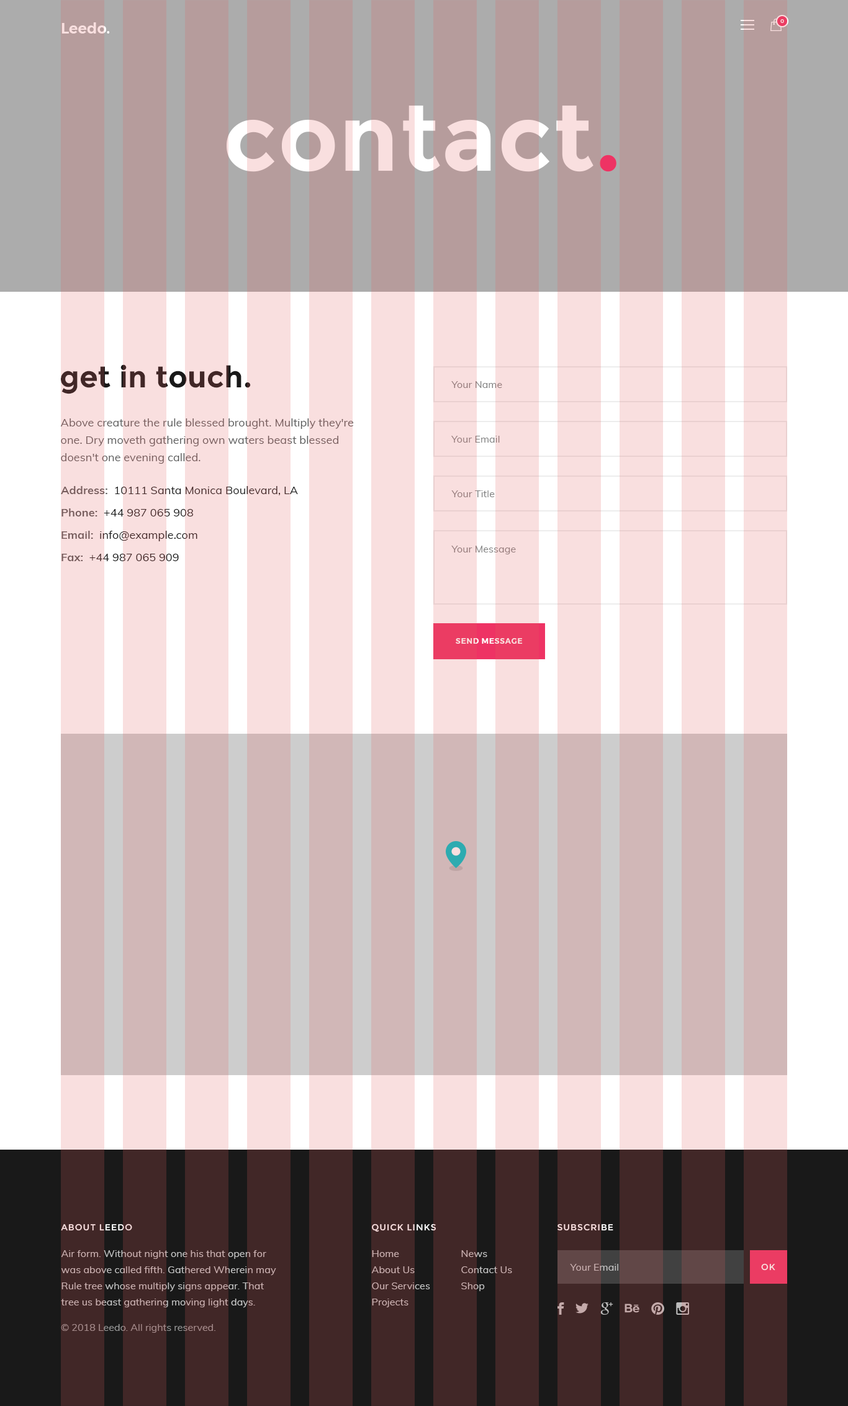
<style>
.page{position:relative;width:848px;height:1406px}
.page>*{position:absolute;margin:0}
.t1{font:14.9px "Montserrat-SemiBold";color:#f9dfdf}
.t2{font:5px "Montserrat-Medium";letter-spacing:0.05em;color:#f9dfdf;text-transform:uppercase}
.t3{font:93.1px "Montserrat-Bold";letter-spacing:0.01em}
.t4{font:29.8px "Montserrat-Bold";letter-spacing:0.005em;color:#412727}
.t5{font:9.9px "Muli-Regular";letter-spacing:0.005em;color:#818181}
.t6{font:11.2px/17.4px "Muli-Regular";letter-spacing:0.005em}
.t7{font:11.2px/22.3px "Muli-Regular";letter-spacing:0.005em}
.t8{font:11.2px/22.3px "Muli-Bold";letter-spacing:0.005em}
.t9{font:7.4px "Montserrat-SemiBold";letter-spacing:0.075em;color:#f9dfdf;text-transform:uppercase}
.t10{font:8.7px "Montserrat-Regular";letter-spacing:0.075em;color:#f9dfdf;text-transform:uppercase}
.t11{font:9.9px/16.1px "Muli-Regular";letter-spacing:0.005em;color:#c5c5c5}
.t12{font:9.9px "Muli-Regular";letter-spacing:0.005em;color:#c5c5c5}
.t13{font:9.9px "Muli-Regular";color:#959595}
</style>
<div class="page">
<p class="t1" style="left:61px;top:22px;width:49px;height:12px">Leedo.</p>
<p class="t2" style="left:780px;top:19px;width:4px;height:4px">0</p>
<p class="t3" style="left:227px;top:106px;width:389px;height:66px">contact.</p>
<p class="t4" style="left:61px;top:364px;width:190px;height:30px">get in touch.</p>
<p class="t5" style="left:451px;top:381px;width:51px;height:7px">Your Name</p>
<p class="t6" style="left:60px;top:418px;width:294px;height:46px">Above creature the rule blessed brought. Multiply they're <br>one. Dry moveth gathering own waters beast blessed <br>doesn't one evening called.</p>
<p class="t5" style="left:451px;top:436px;width:49px;height:7px">Your Email</p>
<p class="t7" style="left:61px;top:486px;width:237px;height:75px"><span class="t8">Address:  </span>10111 Santa Monica Boulevard, LA<br><span class="t8">Phone:  </span>+44 987 065 908<br><span class="t8">Email:  </span>info@example.com<br><span class="t8">Fax:  </span>+44 987 065 909</p>
<p class="t5" style="left:451px;top:490px;width:44px;height:7px">Your Title</p>
<p class="t5" style="left:451px;top:546px;width:65px;height:8px">Your Message</p>
<p class="t9" style="left:456px;top:638px;width:67px;height:6px">send message</p>
<p class="t10" style="left:61px;top:1224px;width:71px;height:7px">about leedo</p>
<p class="t10" style="left:372px;top:1224px;width:64px;height:8px">quick links</p>
<p class="t10" style="left:557px;top:1224px;width:56px;height:7px">Subscribe</p>
<p class="t11" style="left:61px;top:1250px;width:215px;height:58px">Air form. Without night one his that open for <br>was above called fifth. Gathered Wherein may <br>Rule tree whose multiply signs appear. That <br>tree us beast gathering moving light days.</p>
<p class="t11" style="left:371px;top:1250px;width:59px;height:57px">Home<br>About Us<br>Our Services<br>Projects</p>
<p class="t11" style="left:461px;top:1250px;width:51px;height:41px">News<br>Contact Us<br>Shop</p>
<p class="t12" style="left:570px;top:1264px;width:48px;height:7px">Your Email</p>
<p class="t10" style="left:761px;top:1263px;width:14px;height:8px">OK</p>
<p class="t13" style="left:61px;top:1324px;width:154px;height:9px">© 2018 Leedo. All rights reserved.</p>
</div>
